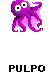
<style>
.page{position:relative;width:55px;height:72px;background:#ffffff}
.page>*{position:absolute;margin:0}
.t1{font:10.3px "Arial-BoldMT";color:#000000;scale:1.11 1}
</style>
<div class="page">
<p class="t1" style="left:9px;top:65px;width:36px;height:7px">PULPO</p>
</div>
